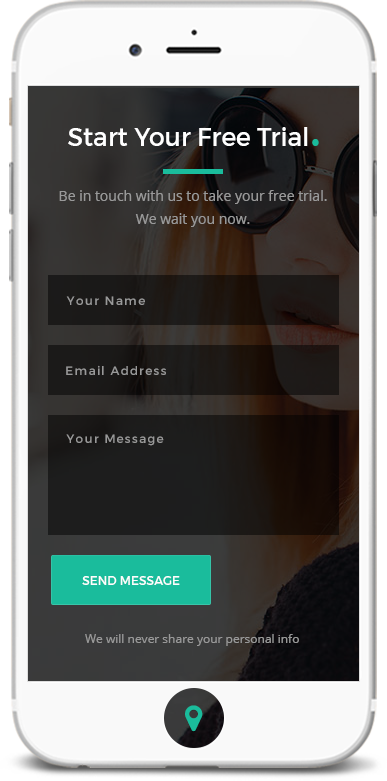
<style>
.page{position:relative;width:387px;height:781px}
.page>*{position:absolute;margin:0}
.t1{font:25px "Montserrat-Regular";color:#ffffff}
.t2{font:50px "Montserrat-Regular";color:#1abc9c}
.t3{font:14px/23px "OpenSans";color:#999999}
.t4{font:12px "Montserrat-Regular";letter-spacing:0.1em;color:#999999}
.t5{font:12px "Montserrat-Regular";color:#fefefe;text-transform:uppercase}
.t6{font:12px "OpenSans";color:#999999}
</style>
<div class="page">
<p class="t1" style="left:68px;top:127px;width:251px;height:19px">Start Your Free Trial<span class="t2">.</span></p>
<p class="t3" style="left:59px;top:190px;width:268px;height:37px;text-align:center">Be in touch with us to take your free trial.<br>We wait you now.</p>
<p class="t4" style="left:66px;top:296px;width:79px;height:9px">Your Name</p>
<p class="t4" style="left:66px;top:365px;width:100px;height:10px">Email Address</p>
<p class="t4" style="left:66px;top:434px;width:98px;height:12px">Your Message</p>
<p class="t5" style="left:82px;top:576px;width:98px;height:9px">Send Message</p>
<p class="t6" style="left:85px;top:634px;width:214px;height:12px">We will never share your personal info</p>
</div>
